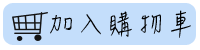
<style>
.page{position:relative;width:200px;height:50px;background:#c4defb}
.page>*{position:absolute;margin:0}
.t1{font:30px "DFHsiuStd-W3";color:#010101}
</style>
<div class="page">
<p class="t1" style="left:50px;top:10px;width:141px;height:28px">加入購物車</p>
</div>
